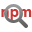
<style>
.page{position:relative;width:32px;height:32px;background:#ffffff}
.page>*{position:absolute;margin:0}
.t1{font:14.9px "Arial-BoldMT";color:#cb3838}
</style>
<div class="page">
<p class="t1" style="left:1px;top:9px;width:31px;height:11px">npm</p>
</div>
